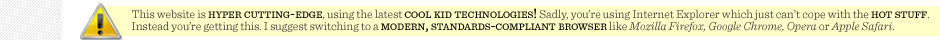
<style>
.page{position:relative;width:940px;height:40px;background:#ffffc8}
.page>*{position:absolute;margin:0}
.t1{font:12px/12px "Sentinel-Light";color:#333333}
.t2{font:14px/12px "Sentinel-Medium";color:#000000;font-variant:small-caps}
.t3{font:12px/12px "Sentinel-LightItalic";color:#333333}
</style>
<div class="page">
<p class="t1" style="left:132px;top:8px;width:797px;height:24px">This website is <span class="t2">hyper cutting-edge</span>, using the latest <span class="t2">cool kid technologies!</span> Sadly, you’re using Internet Explorer which just can’t cope with the <span class="t2">hot stuff</span>.<br>Instead you’re getting this. I suggest switching to a <span class="t2">modern, standards-compliant browser </span>like <span class="t3">Mozilla Firefox, Google Chrome, Opera</span> or <span class="t3">Apple Safari</span>.</p>
</div>
